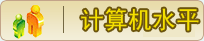
<style>
.page{position:relative;width:204px;height:41px}
.page>*{position:absolute;margin:0}
.t1{font:24px "SimHei";color:#f5e000}
</style>
<div class="page">
<p class="t1" style="left:81px;top:8px;width:118px;height:23px">计算机水平</p>
</div>
